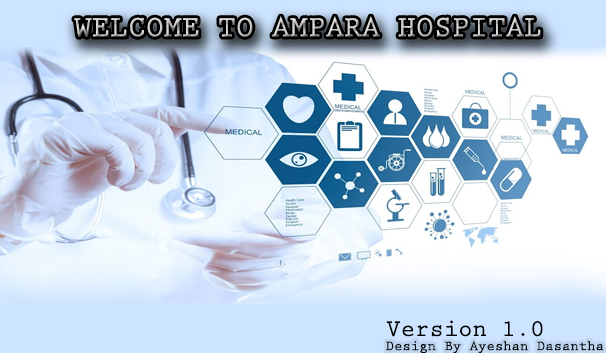
<style>
.page{position:relative;width:606px;height:353px}
.page>*{position:absolute;margin:0}
.t1{font:30px "PrestigeEliteStd-Bd"}
.t2{font:24px "PrestigeEliteStd-Bd";color:#000000}
.t3{font:14px "PrestigeEliteStd-Bd";color:#000000}
</style>
<div class="page">
<p class="t1" style="left:74px;top:16px;width:467px;height:21px">WELCOME TO AMPARA HOSPITAL</p>
<p class="t2" style="left:386px;top:320px;width:157px;height:17px">Version 1.0</p>
<p class="t3" style="left:386px;top:340px;width:218px;height:13px">Design By Ayeshan Dasantha</p>
</div>
